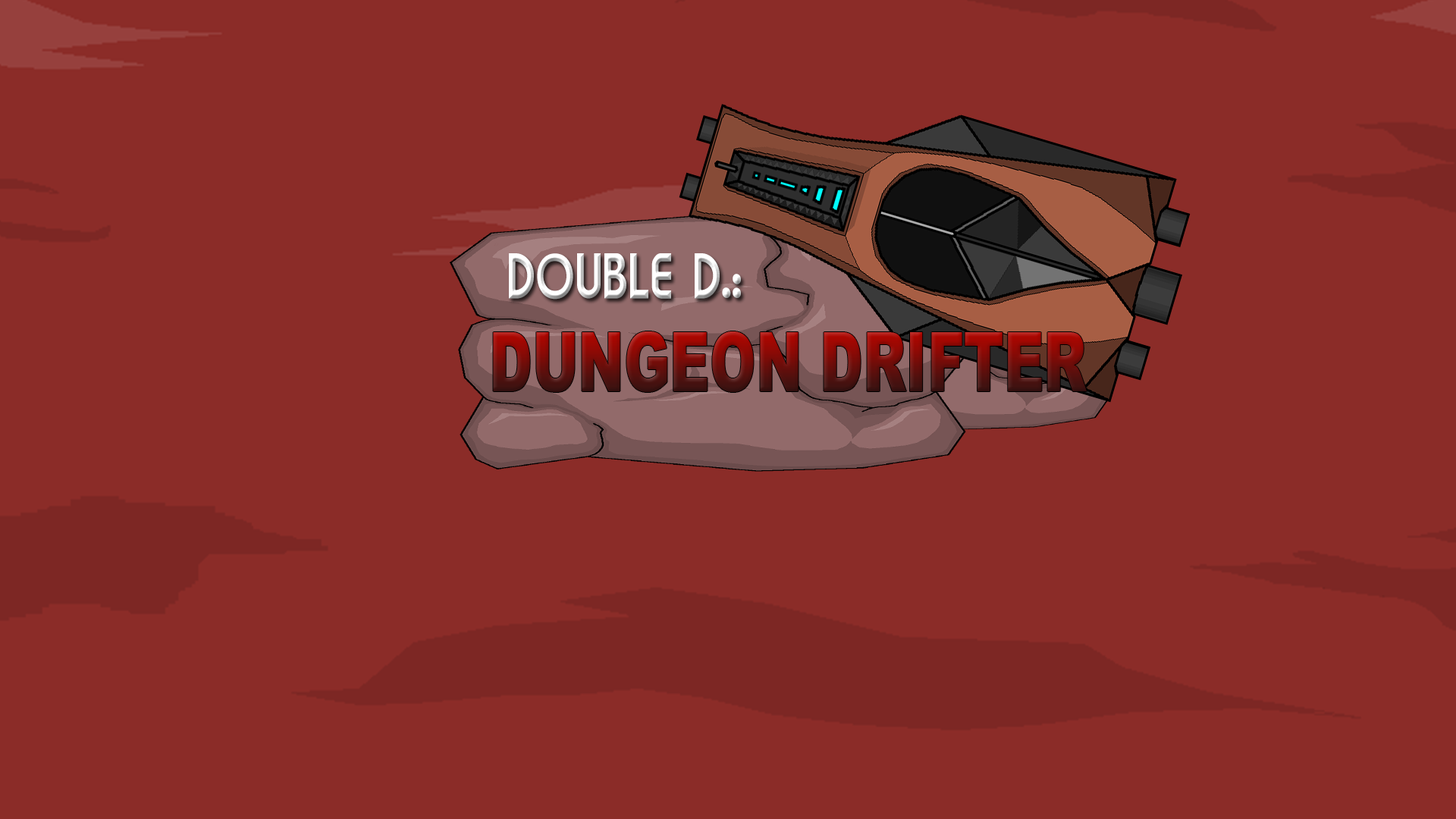
<style>
.page{position:relative;width:1456px;height:819px;background:#8b2c28}
.page>*{position:absolute;margin:0}
.t1{font:54.3px "Brandish";scale:0.78 1}
.t2{font:82.7px "Arial-Black";scale:0.67 1}
</style>
<div class="page">
<p class="t1" style="left:509px;top:253px;width:232px;height:47px">DOUBLE D.:</p>
<p class="t2" style="left:493px;top:331px;width:594px;height:61px">DUNGEON DRIFTER</p>
</div>
